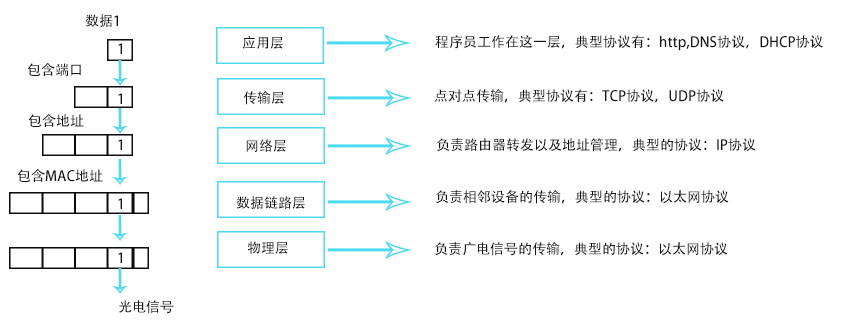
<style>
.page{position:relative;width:851px;height:327px;background:#ffffff}
.page>*{position:absolute;margin:0}
.t1{font:14px "AdobeHeitiStd-Regular";color:#141212}
</style>
<div class="page">
<p class="t1" style="left:85px;top:14px;width:33px;height:13px">数据1</p>
<p class="t1" style="left:242px;top:36px;width:41px;height:13px">应用层</p>
<p class="t1" style="left:435px;top:35px;width:388px;height:16px">程序员工作在这一层，典型协议有：http,DNS协议，DHCP协议</p>
<p class="t1" style="left:118px;top:43px;width:4px;height:11px">1</p>
<p class="t1" style="left:27px;top:63px;width:54px;height:14px">包含端口</p>
<p class="t1" style="left:434px;top:89px;width:290px;height:14px">点对点传输，典型协议有：TCP协议，UDP协议</p>
<p class="t1" style="left:118px;top:93px;width:4px;height:11px">1</p>
<p class="t1" style="left:243px;top:91px;width:41px;height:14px">传输层</p>
<p class="t1" style="left:28px;top:114px;width:56px;height:13px">包含地址</p>
<p class="t1" style="left:118px;top:139px;width:4px;height:11px">1</p>
<p class="t1" style="left:246px;top:139px;width:40px;height:13px">网络层</p>
<p class="t1" style="left:436px;top:138px;width:320px;height:14px">负责路由器转发以及地址管理，典型的协议：IP协议</p>
<p class="t1" style="left:17px;top:169px;width:86px;height:13px">包含MAC地址</p>
<p class="t1" style="left:118px;top:198px;width:4px;height:11px">1</p>
<p class="t1" style="left:236px;top:196px;width:69px;height:13px">数据链路层</p>
<p class="t1" style="left:435px;top:190px;width:294px;height:14px">负责相邻设备的传输，典型的协议：以太网协议</p>
<p class="t1" style="left:247px;top:241px;width:41px;height:13px">物理层</p>
<p class="t1" style="left:434px;top:242px;width:294px;height:14px">负责广电信号的传输，典型的协议：以太网协议</p>
<p class="t1" style="left:118px;top:252px;width:4px;height:11px">1</p>
<p class="t1" style="left:119px;top:300px;width:55px;height:14px">光电信号</p>
</div>
